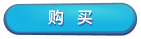
<style>
.page{position:relative;width:141px;height:39px;background:#ffffff}
.page>*{position:absolute;margin:0}
.t1{font:16px "SourceHanSansCN-Regular";letter-spacing:0.8em;color:#ffffff}
.t2{font:16px "SourceHanSansCN-Regular";letter-spacing:0.8em}
</style>
<div class="page">
<p class="t1" style="left:48px;top:9px;width:44px;height:16px">购买</p>
<p class="t2" style="left:49px;top:11px;width:44px;height:16px">购买</p>
</div>
